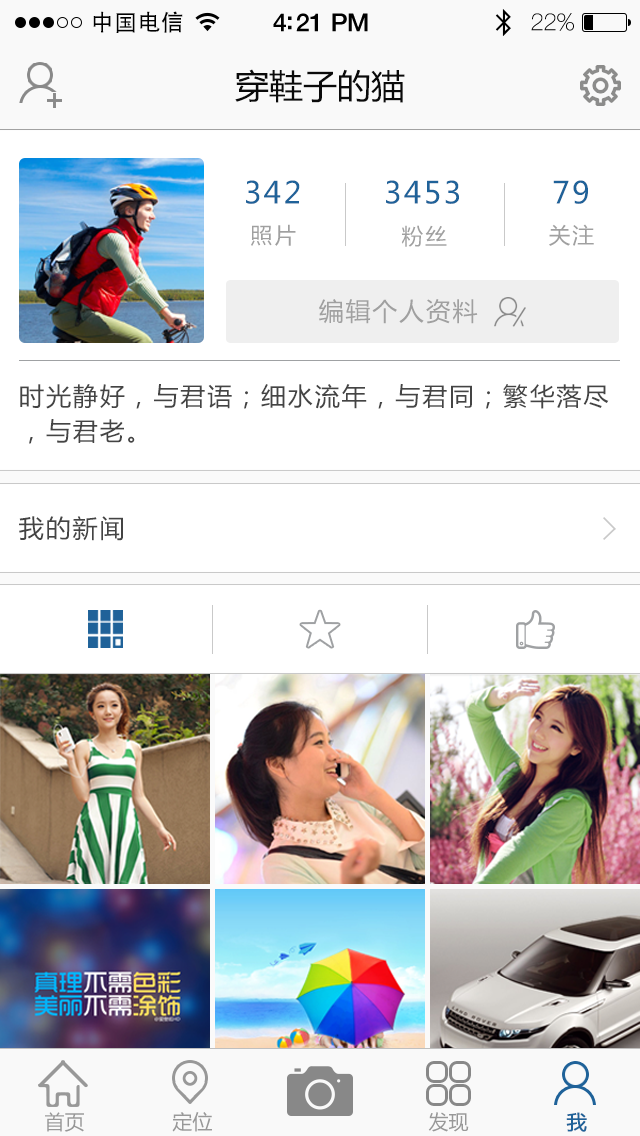
<style>
.page{position:relative;width:640px;height:1136px;background:#ffffff}
.page>*{position:absolute;margin:0}
.t1{font:23px "AdobeHeitiStd-Regular";letter-spacing:0.02em;color:#000000}
.t2{font:25px "HelveticaNeue-Medium";letter-spacing:-0.02em;color:#000000}
.t3{font:24px "HelveticaNeue";letter-spacing:-0.02em;color:#000000}
.t4{font:34px "MicrosoftYaHei";color:#0a0a0a}
.t5{font:30px "MicrosoftYaHei";letter-spacing:0.075em;color:#1f6299}
.t6{font:22px "MicrosoftYaHei";letter-spacing:0.075em;color:#a0a0a0}
.t7{font:25px "MicrosoftYaHei";letter-spacing:0.075em;color:#a0a0a0}
.t8{font:25px/35px "MicrosoftYaHei";letter-spacing:0.075em;color:#444444}
.t9{font:25px "MicrosoftYaHei";letter-spacing:0.075em;color:#444444}
.t10{font:20px "MicrosoftYaHei";color:#989898}
.t11{font:20px "MicrosoftYaHei";color:#1f6299;font-weight:bold}
</style>
<div class="page">
<p class="t1" style="left:93px;top:11px;width:90px;height:22px">中国电信</p>
<p class="t2" style="left:273px;top:13px;width:95px;height:19px">4:21 PM</p>
<p class="t3" style="left:531px;top:13px;width:43px;height:18px">22%</p>
<p class="t4" style="left:235px;top:69px;width:170px;height:34px">穿鞋子的猫</p>
<p class="t5" style="left:246px;top:180px;width:54px;height:24px">342</p>
<p class="t5" style="left:386px;top:180px;width:73px;height:24px">3453</p>
<p class="t5" style="left:553px;top:180px;width:35px;height:24px">79</p>
<p class="t6" style="left:251px;top:224px;width:45px;height:22px">照片</p>
<p class="t6" style="left:401px;top:225px;width:46px;height:22px">粉丝</p>
<p class="t6" style="left:549px;top:224px;width:45px;height:22px">关注</p>
<p class="t7" style="left:319px;top:299px;width:159px;height:25px">编辑个人资料</p>
<p class="t8" style="left:20px;top:384px;width:589px;height:60px">时光静好，与君语；细水流年，与君同；繁华落尽，与君老。</p>
<p class="t9" style="left:19px;top:516px;width:104px;height:25px">我的新闻</p>
<p class="t10" style="left:45px;top:1112px;width:39px;height:20px">首页</p>
<p class="t10" style="left:172px;top:1112px;width:40px;height:20px">定位</p>
<p class="t10" style="left:428px;top:1112px;width:41px;height:20px">发现</p>
<p class="t11" style="left:566px;top:1112px;width:21px;height:20px">我</p>
</div>
